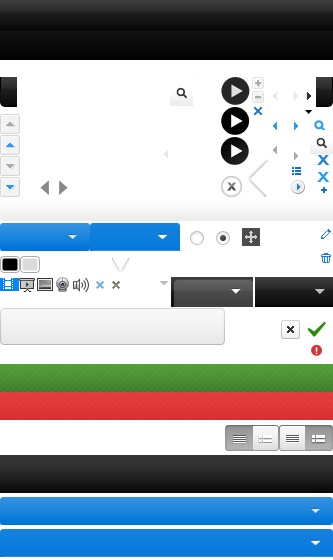
<style>
.page{position:relative;width:333px;height:560px;background:#ffffff}
.page>*{position:absolute;margin:0}
.t1{font:13px "Arial-BoldMT";color:#1d80d4;scale:1.37 1}
.t2{font:13px "Arial-BoldMT";color:#269bff;scale:1.37 1}
</style>
<div class="page">
<p class="t1" style="left:317px;top:155px;width:13px;height:10px">X</p>
<p class="t2" style="left:317px;top:172px;width:13px;height:10px">X</p>
</div>
